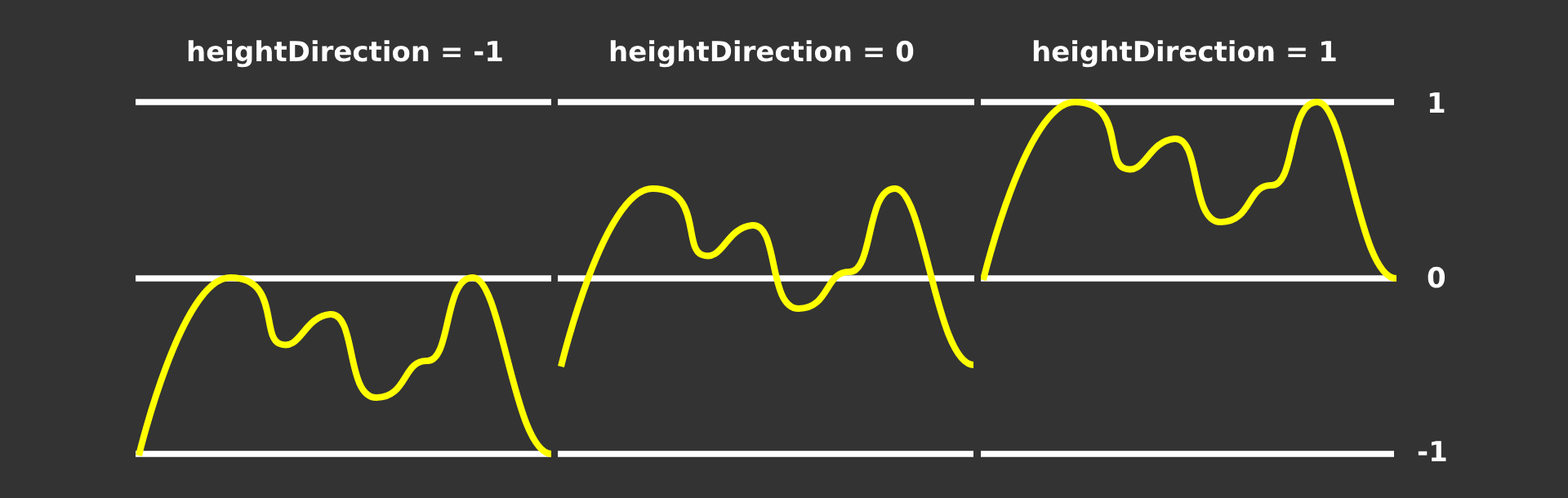
<style>
.page{position:relative;width:1568px;height:498px;background:#333333}
.page>*{position:absolute;margin:0}
.t1{font:27.8px "DejaVuSans-Bold";color:#ffffff}
</style>
<div class="page">
<p class="t1" style="left:188px;top:40px;width:314px;height:28px">heightDirection = -1</p>
<p class="t1" style="left:610px;top:40px;width:304px;height:28px">heightDirection = 0</p>
<p class="t1" style="left:1033px;top:40px;width:303px;height:28px">heightDirection = 1</p>
<p class="t1" style="left:1429px;top:92px;width:16px;height:21px">1</p>
<p class="t1" style="left:1428px;top:266px;width:18px;height:22px">0</p>
<p class="t1" style="left:1418px;top:441px;width:28px;height:20px">-1</p>
</div>
